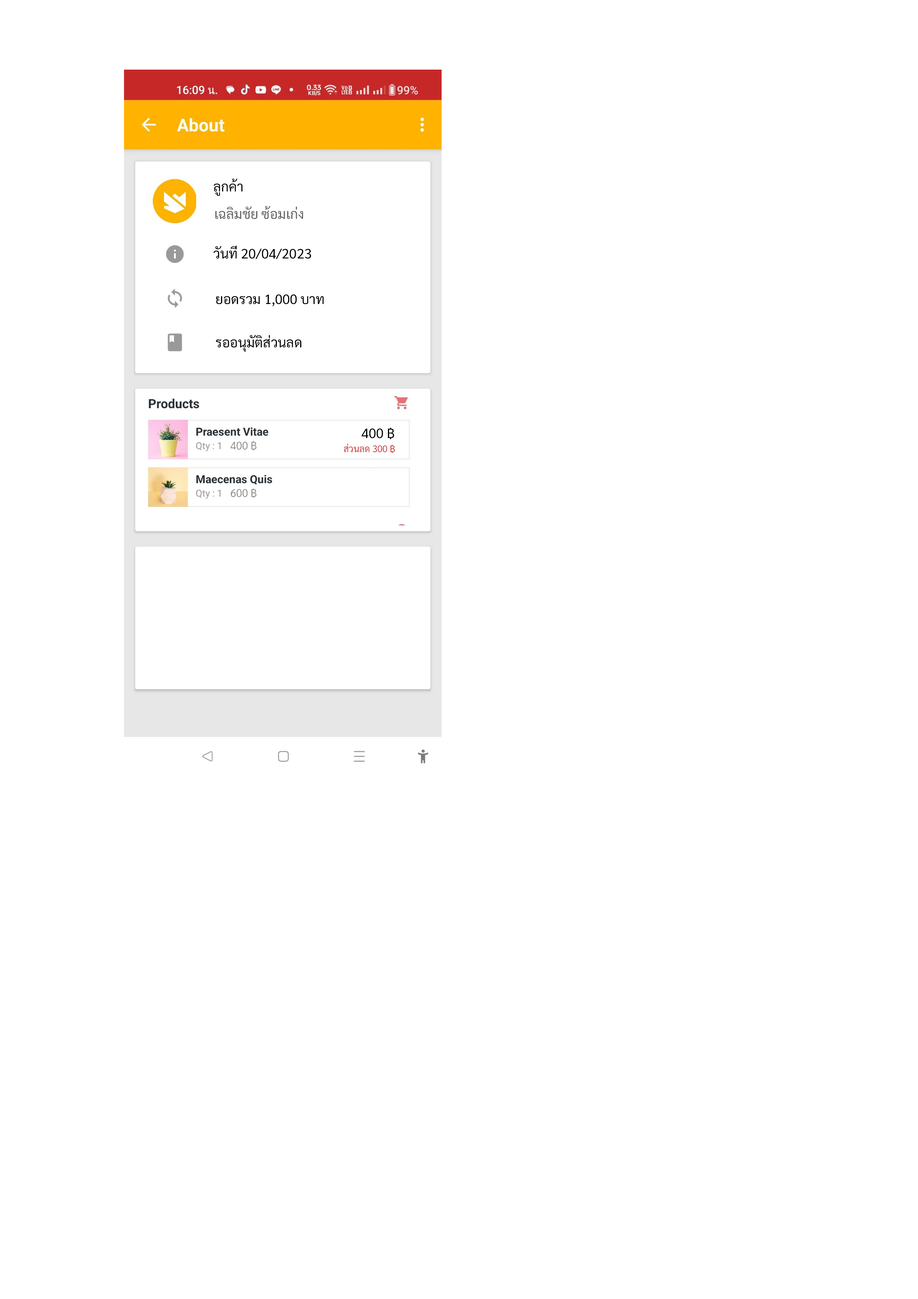
<style>
.page{position:relative;width:918px;height:1299px;background:#ffffff}
.page>*{position:absolute;margin:0}
.t1{font:13.5px "Sarabun-Regular";color:#000000}
.t2{font:13.5px "Sarabun-Regular";color:#626262}
.t3{font:11.1px "Sarabun-Regular";color:#909090;scale:0.97 1}
.t4{font:9.5px "Sarabun-Regular";color:#cb3d3d;scale:0.97 1}
</style>
<div class="page">
<p class="t1" style="left:214px;top:178px;width:28px;height:18px">ลูกค้า</p>
<p class="t2" style="left:215px;top:206px;width:88px;height:13px">เฉลิมชัย ซ้อมเก่ง</p>
<p class="t1" style="left:213px;top:245px;width:98px;height:14px">วันที่่ 20/04/2023</p>
<p class="t1" style="left:216px;top:294px;width:108px;height:13px">ยอดรวม 1,000 บาท</p>
<p class="t1" style="left:216px;top:335px;width:85px;height:17px">รออนุมัติส่วนลด</p>
<p class="t1" style="left:362px;top:428px;width:32px;height:11px">400 ฿</p>
<p class="t3" style="left:230px;top:441px;width:27px;height:10px">400 ฿</p>
<p class="t4" style="left:344px;top:443px;width:51px;height:10px">ส่วนลด 300 ฿</p>
<p class="t3" style="left:231px;top:488px;width:26px;height:10px">600 ฿</p>
</div>
